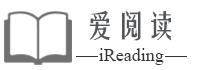
<style>
.page{position:relative;width:200px;height:70px;background:#ffffff}
.page>*{position:absolute;margin:0}
.t1{font:30px "FZYTK--GBK1-0";letter-spacing:0.025em;color:#54575a}
.t2{font:18px "TimesNewRomanPSMT";color:#333333}
</style>
<div class="page">
<p class="t1" style="left:89px;top:10px;width:83px;height:31px">爱阅读</p>
<p class="t2" style="left:99px;top:48px;width:65px;height:17px">iReading</p>
</div>
